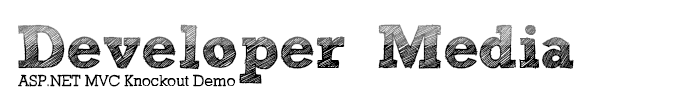
<style>
.page{position:relative;width:686px;height:104px;background:#ffffff}
.page>*{position:absolute;margin:0}
.t1{font:61.3px "freeversionSketchBlock-Bold";letter-spacing:-0.01em}
.t2{font:61.3px "freeversionSketchBlock-Bold";letter-spacing:-0.025em}
.t3{font:61.3px "freeversionSketchBlock-Bold"}
.t4{font:16px "SketchBlock-Light";color:#000000}
</style>
<div class="page">
<p class="t1" style="left:18px;top:24px;width:556px;height:60px">Developer <span class="t2">Me</span><span class="t3">dia</span></p>
<p class="t4" style="left:18px;top:74px;width:218px;height:13px">ASP.NET MVC Knockout Demo</p>
</div>
